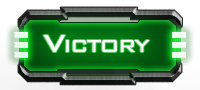
<style>
.page{position:relative;width:200px;height:90px}
.page>*{position:absolute;margin:0}
.t1{font:33px "BankGothicBold";letter-spacing:-0.08em;color:#fcfffc;font-variant:small-caps}
</style>
<div class="page">
<p class="t1" style="left:43px;top:35px;width:107px;height:17px">Victory</p>
</div>
